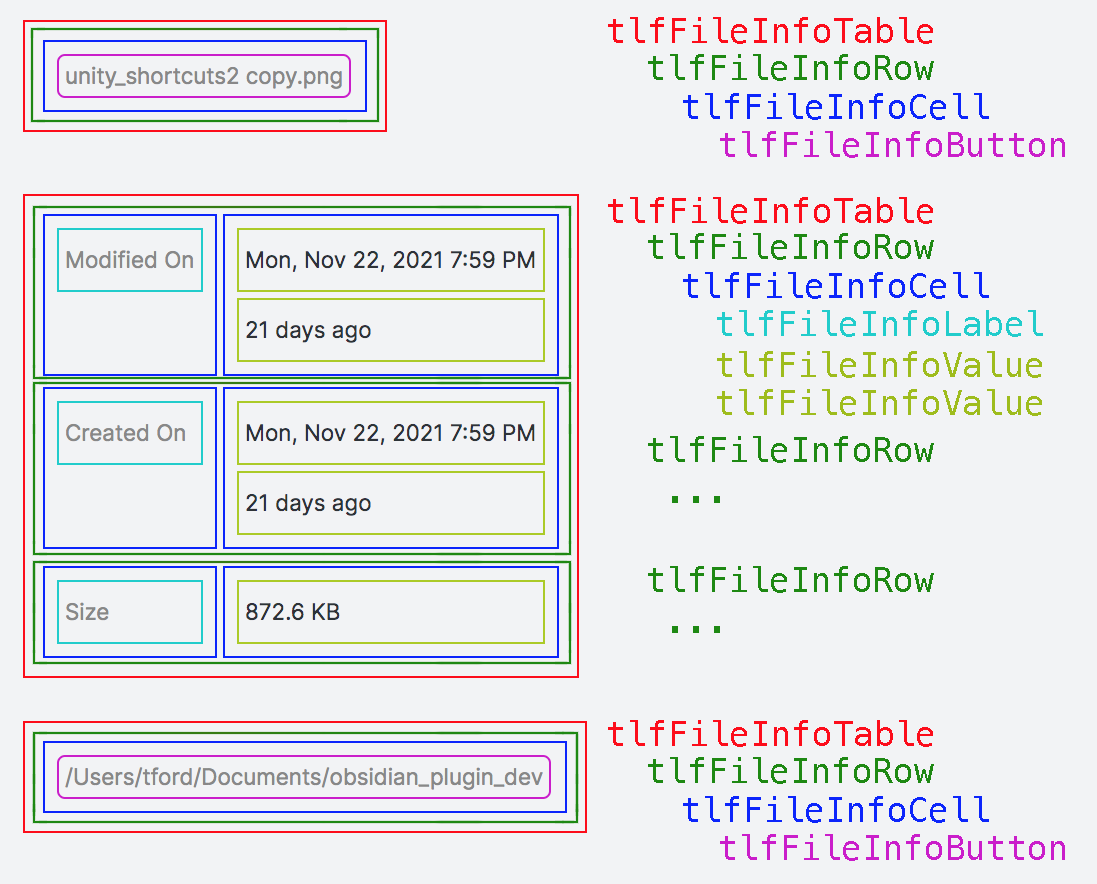
<style>
.page{position:relative;width:1097px;height:884px;background:#f2f3f5}
.page>*{position:absolute;margin:0}
.t1{font:34.3px "Menlo-Regular";color:#fc0d1b}
.t2{font:34.3px "Menlo-Regular";color:#1e8813}
.t3{font:34.3px "Menlo-Regular";color:#0c25fb}
.t4{font:34.3px "Menlo-Regular";color:#ca1eca}
.t5{font:34.3px "Menlo-Regular";color:#22cccb}
.t6{font:34.3px "Menlo-Regular";color:#9ebc1d}
</style>
<div class="page">
<p class="t1" style="left:608px;top:17px;width:325px;height:27px">tlfFileInfoTable</p>
<p class="t2" style="left:648px;top:54px;width:286px;height:27px">tlfFileInfoRow</p>
<p class="t3" style="left:683px;top:93px;width:306px;height:27px">tlfFileInfoCell</p>
<p class="t4" style="left:720px;top:131px;width:345px;height:27px">tlfFileInfoButton</p>
<p class="t1" style="left:608px;top:197px;width:325px;height:27px">tlfFileInfoTable</p>
<p class="t2" style="left:648px;top:233px;width:286px;height:27px">tlfFileInfoRow</p>
<p class="t3" style="left:683px;top:272px;width:306px;height:27px">tlfFileInfoCell</p>
<p class="t5" style="left:717px;top:310px;width:326px;height:27px">tlfFileInfoLabel</p>
<p class="t6" style="left:717px;top:351px;width:325px;height:27px">tlfFileInfoValue</p>
<p class="t6" style="left:717px;top:389px;width:325px;height:27px">tlfFileInfoValue</p>
<p class="t2" style="left:648px;top:436px;width:286px;height:67px">tlfFileInfoRow<br> ...</p>
<p class="t2" style="left:648px;top:566px;width:286px;height:67px">tlfFileInfoRow<br> ...</p>
<p class="t1" style="left:608px;top:720px;width:325px;height:27px">tlfFileInfoTable</p>
<p class="t2" style="left:648px;top:757px;width:286px;height:27px">tlfFileInfoRow</p>
<p class="t3" style="left:683px;top:796px;width:306px;height:27px">tlfFileInfoCell</p>
<p class="t4" style="left:720px;top:834px;width:345px;height:27px">tlfFileInfoButton</p>
</div>
